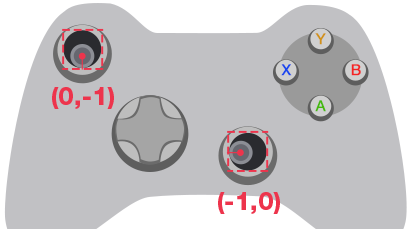
<style>
.page{position:relative;width:410px;height:229px;background:#c1c1c4}
.page>*{position:absolute;margin:0}
.t1{font:15px "HelveticaNeue";letter-spacing:0.06em;color:#d19218;font-weight:bold}
.t2{font:15px "HelveticaNeue";letter-spacing:0.06em;color:#1a47ed;font-weight:bold}
.t3{font:15px "HelveticaNeue";letter-spacing:0.06em;color:#f32424;font-weight:bold}
.t4{font:25px "HelveticaNeueCyr-Black";color:#ed344c}
.t5{font:15px "HelveticaNeue";letter-spacing:0.06em;color:#47ba0e;font-weight:bold}
</style>
<div class="page">
<p class="t1" style="left:315px;top:33px;width:11px;height:12px">Y</p>
<p class="t2" style="left:281px;top:64px;width:11px;height:12px">X</p>
<p class="t3" style="left:351px;top:64px;width:10px;height:12px">B</p>
<p class="t4" style="left:52px;top:87px;width:62px;height:22px">(0,-1)</p>
<p class="t5" style="left:315px;top:100px;width:11px;height:12px">A</p>
<p class="t4" style="left:218px;top:192px;width:62px;height:22px">(-1,0)</p>
</div>
